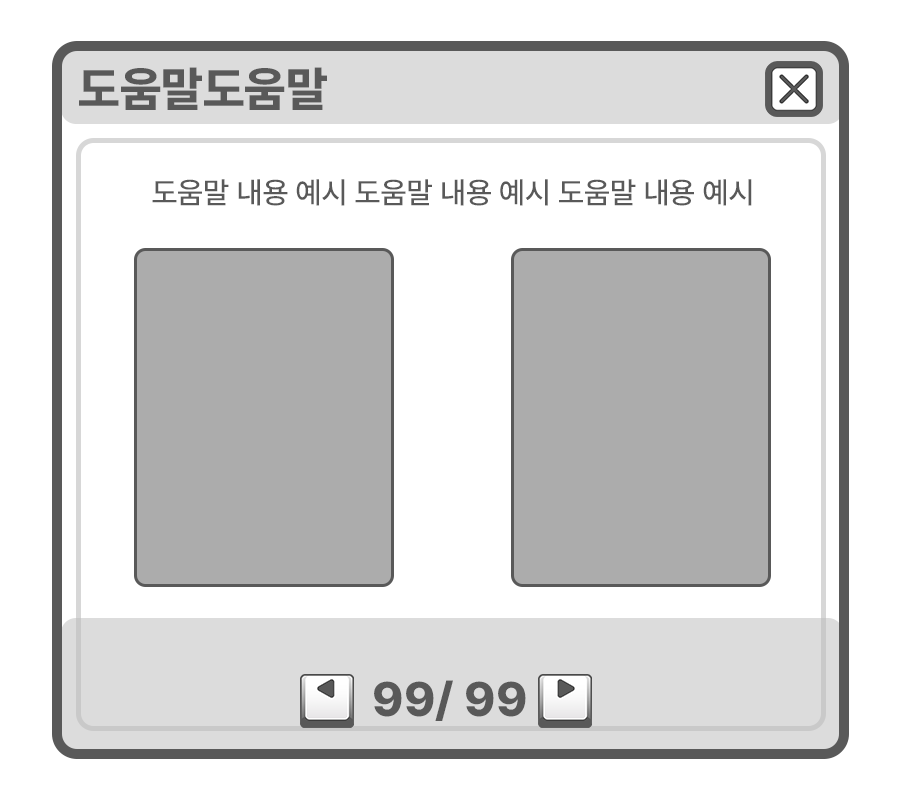
<style>
.page{position:relative;width:900px;height:800px;background:#ffffff}
.page>*{position:absolute;margin:0}
.t1{font:48px "Pretendard-ExtraBold";color:#595959}
.t2{font:30px "Pretendard-Medium";color:#595959}
</style>
<div class="page">
<p class="t1" style="left:79px;top:67px;width:248px;height:43px">도움말도움말</p>
<p class="t2" style="left:152px;top:179px;width:600px;height:27px">도움말 내용 예시 도움말 내용 예시 도움말 내용 예시</p>
<p class="t1" style="left:374px;top:680px;width:152px;height:41px">99/ 99</p>
</div>
